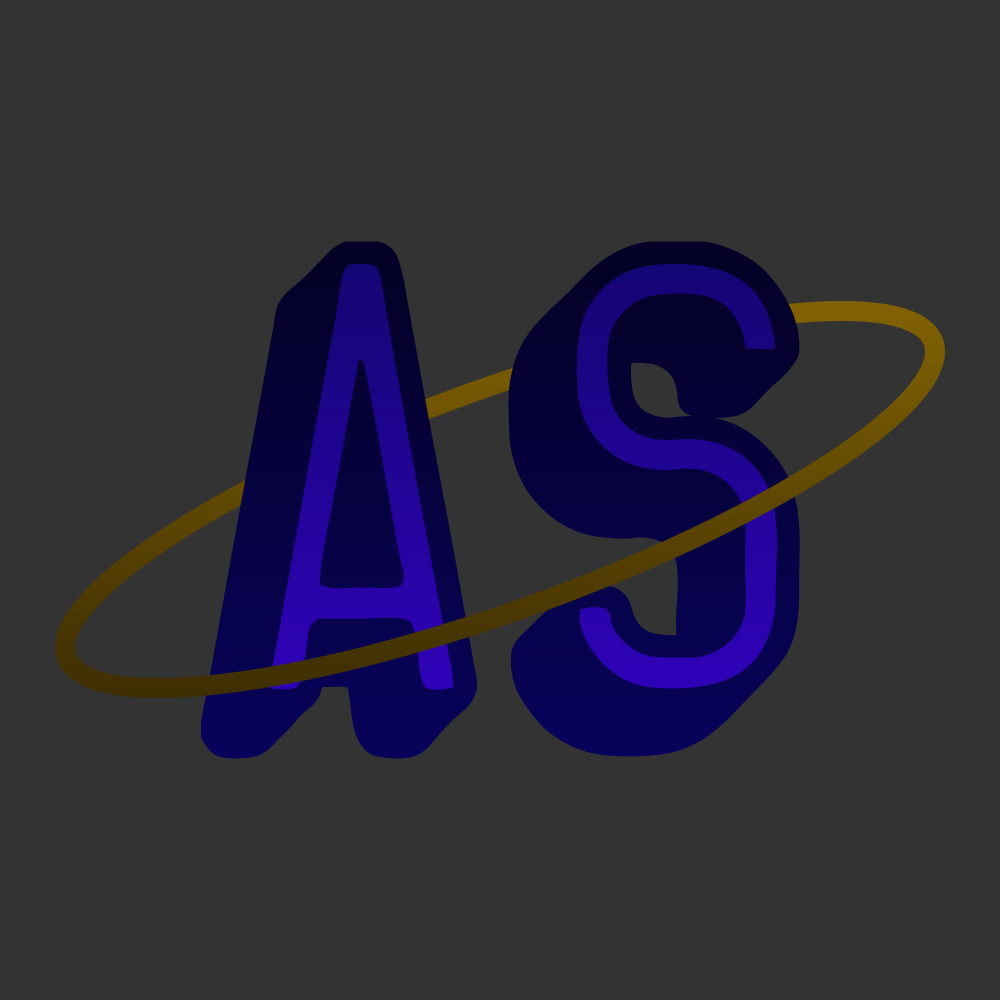
<style>
.page{position:relative;width:1000px;height:1000px;background:#333333}
.page>*{position:absolute;margin:0}
.t1{font:720.8px "Gallagher-Gallagher";letter-spacing:-0.02em;color:#060240;font-weight:bold}
</style>
<div class="page">
<p class="t1" style="left:201px;top:241px;width:599px;height:518px">AS</p>
</div>
